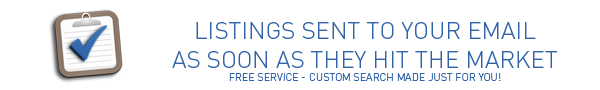
<style>
.page{position:relative;width:600px;height:90px;background:#ffffff}
.page>*{position:absolute;margin:0}
.t1{font:24px "DINPro-Light";color:#3163a8;text-transform:uppercase}
.t2{font:10.7px "DINPro-Light";color:#3163a8;text-transform:uppercase}
</style>
<div class="page">
<p class="t1" style="left:172px;top:22px;width:386px;height:59px;text-align:center">listings sent to your email<br>as soon as they hit the market<br><span class="t2">free service - custom search made just for you!</span></p>
</div>
